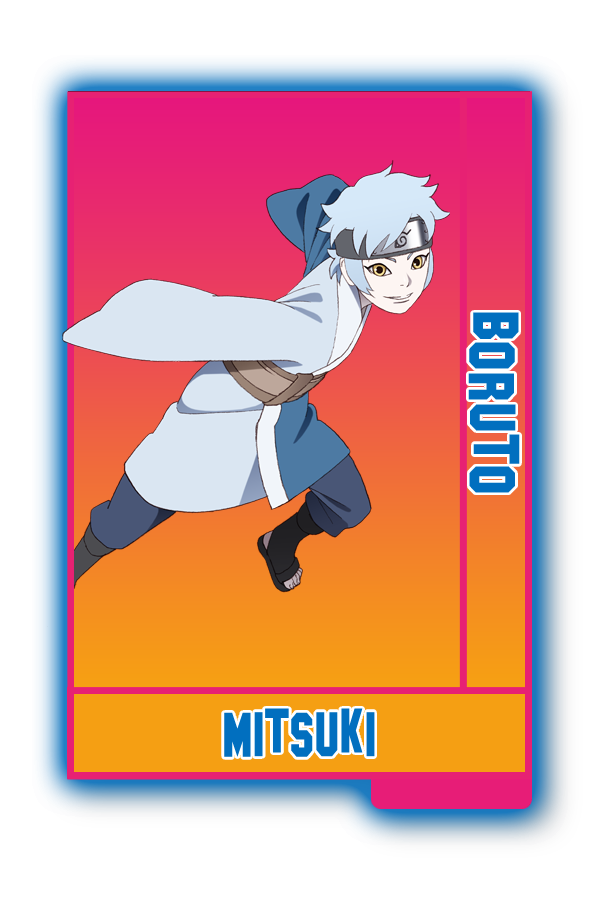
<style>
.page{position:relative;width:600px;height:900px;background:#ffffff}
.page>*{position:absolute;margin:0}
.t1{font:64.7px "SFHollywoodHills";color:#016fbf}
.t2{font:62.9px "SFHollywoodHills";color:#016fbf;scale:0.83 1}
</style>
<div class="page">
<p class="t1" style="left:468px;top:312px;width:52px;height:181px;rotate:90deg">Boruto</p>
<p class="t2" style="left:224px;top:708px;width:151px;height:49px">Mitsuki</p>
</div>
